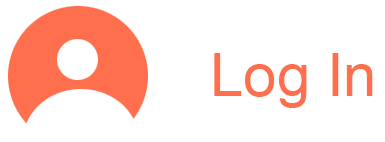
<style>
.page{position:relative;width:385px;height:142px;background:#ffffff}
.page>*{position:absolute;margin:0}
.t1{font:60px "ArialMT";color:#ff6f4d}
</style>
<div class="page">
<p class="t1" style="left:214px;top:53px;width:159px;height:55px">Log In</p>
</div>
